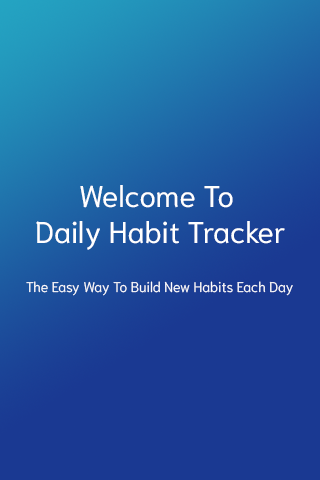
<style>
.page{position:relative;width:320px;height:480px;background:#1a3992}
.page>*{position:absolute;margin:0}
.t1{font:30px/36px "Niramit-Regular";color:#ffffff}
.t2{font:14px "Niramit-Light";color:#ffffff}
</style>
<div class="page">
<p class="t1" style="left:36px;top:185px;width:249px;height:65px;text-align:center">Welcome To <br>Daily Habit Tracker</p>
<p class="t2" style="left:26px;top:281px;width:267px;height:15px">The Easy Way To Build New Habits Each Day</p>
</div>
